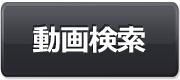
<style>
.page{position:relative;width:180px;height:80px}
.page>*{position:absolute;margin:0}
.t1{font:29.7px "Meiryo-Bold";letter-spacing:-0.05em;color:#ffffff;text-transform:uppercase}
</style>
<div class="page">
<p class="t1" style="left:32px;top:26px;width:114px;height:27px">動画検索</p>
</div>
